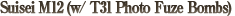
<style>
.page{position:relative;width:235px;height:16px;background:#ffffff}
.page>*{position:absolute;margin:0}
.t1{font:16px "RyuminPro-ExBold";letter-spacing:-0.08em;color:#4a3f32;font-weight:bold;scale:0.87 1}
</style>
<div class="page">
<p class="t1" style="left:0px;top:0px;width:232px;height:17px">Suisei M12 (w/ T31 Photo Fuze Bombs)</p>
</div>
